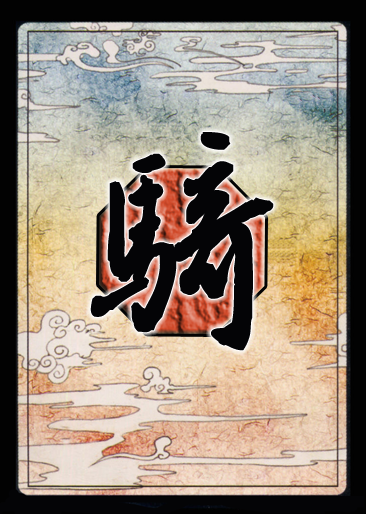
<style>
.page{position:relative;width:366px;height:514px}
.page>*{position:absolute;margin:0}
.t1{font:213.9px "ª÷±ö¯ó¦æ®Ñ";color:#040406;font-weight:bold;scale:1.14 1}
</style>
<div class="page">
<p class="t1" style="left:90px;top:132px;width:184px;height:219px">騎</p>
</div>
